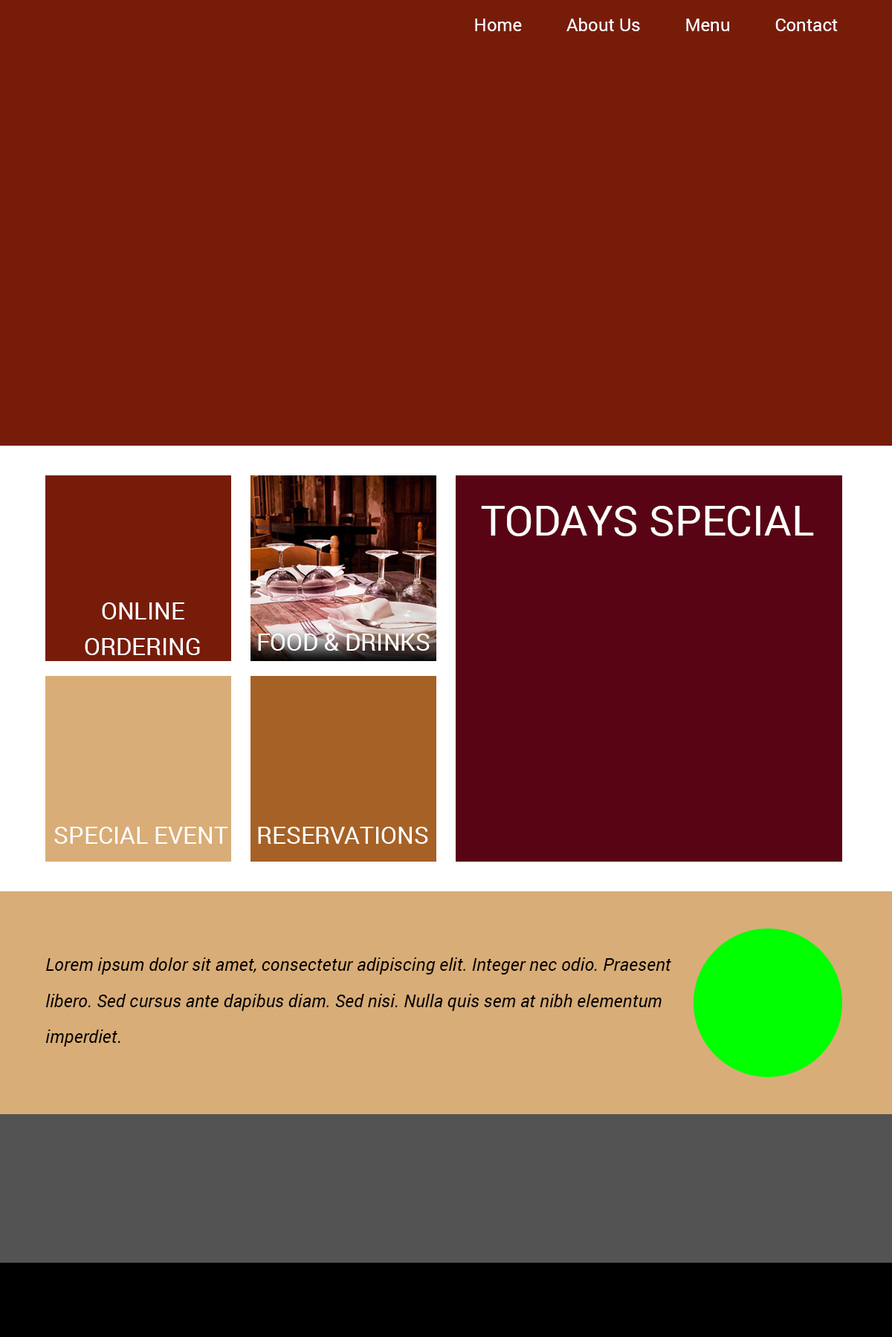
<style>
.page{position:relative;width:892px;height:1337px;background:#781c0a}
.page>*{position:absolute;margin:0}
.t1{font:17.9px "Roboto-Regular";color:#ffffff}
.t2{font:41.7px "Roboto-Regular";color:#ffffff}
.t3{font:23.8px/35.7px "Roboto-Regular";color:#ffffff}
.t4{font:23.8px "Roboto-Regular";color:#ffffff}
.t5{font:17.9px/35.7px "Roboto-Italic";color:#000000}
</style>
<div class="page">
<p class="t1" style="left:475px;top:18px;width:362px;height:13px">Home          About Us          Menu          Contact Us</p>
<p class="t2" style="left:481px;top:506px;width:333px;height:30px">TODAYS SPECIAL</p>
<p class="t3" style="left:85px;top:603px;width:115px;height:52px;text-align:center">ONLINE ORDERING</p>
<p class="t4" style="left:258px;top:634px;width:171px;height:17px">FOOD &amp; DRINKS</p>
<p class="t4" style="left:54px;top:827px;width:174px;height:17px">SPECIAL EVENT</p>
<p class="t4" style="left:258px;top:827px;width:170px;height:17px">RESERVATIONS</p>
<p class="t5" style="left:45px;top:958px;width:626px;height:89px">Lorem ipsum dolor sit amet, consectetur adipiscing elit. Integer nec odio. Praesent libero. Sed cursus ante dapibus diam. Sed nisi. Nulla quis sem at nibh elementum imperdiet.</p>
</div>
